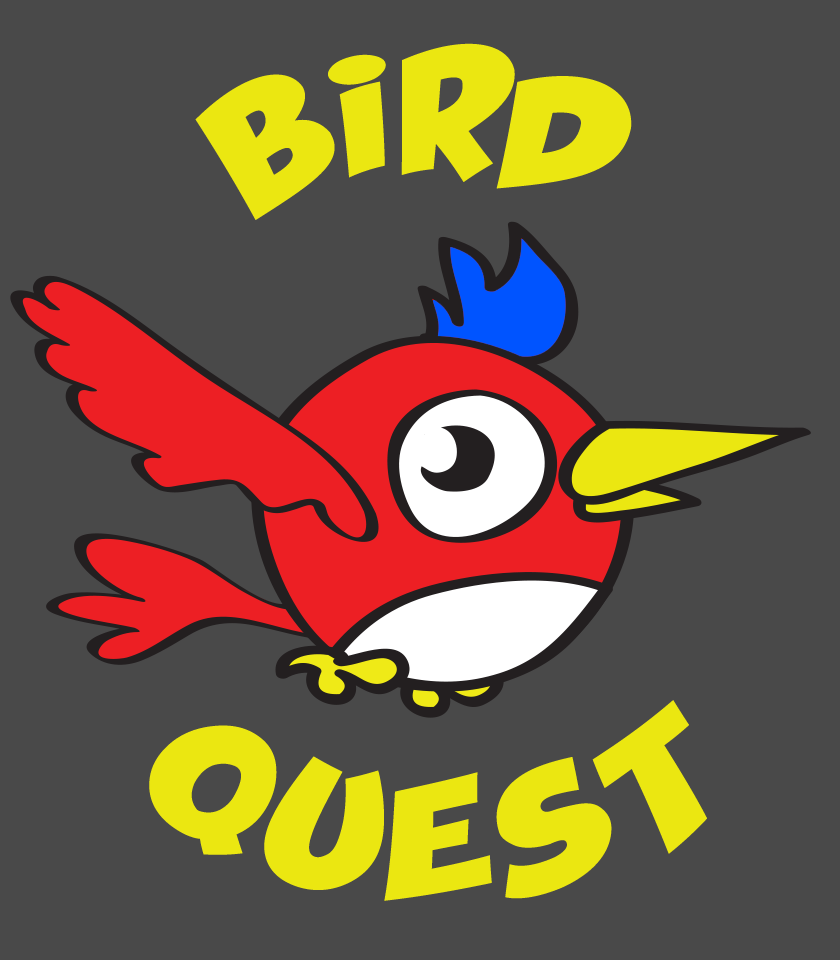
<style>
.page{position:relative;width:840px;height:960px;background:#494949}
.page>*{position:absolute;margin:0}
.t1{font:150px "KaBlam";letter-spacing:0.1em;color:#ebe711}
</style>
<div class="page">
<p class="t1" style="left:195px;top:43px;width:437px;height:177px">BIRD</p>
<p class="t1" style="left:149px;top:700px;width:558px;height:201px">QUEST</p>
</div>
